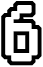
<style>
.page{position:relative;width:43px;height:67px;background:#ffffff}
.page>*{position:absolute;margin:0}
.t1{font:72px "Cubic_11";letter-spacing:0.1em;color:#ffffff;font-weight:bold}
</style>
<div class="page">
<p class="t1" style="left:5px;top:5px;width:33px;height:57px">6</p>
</div>
